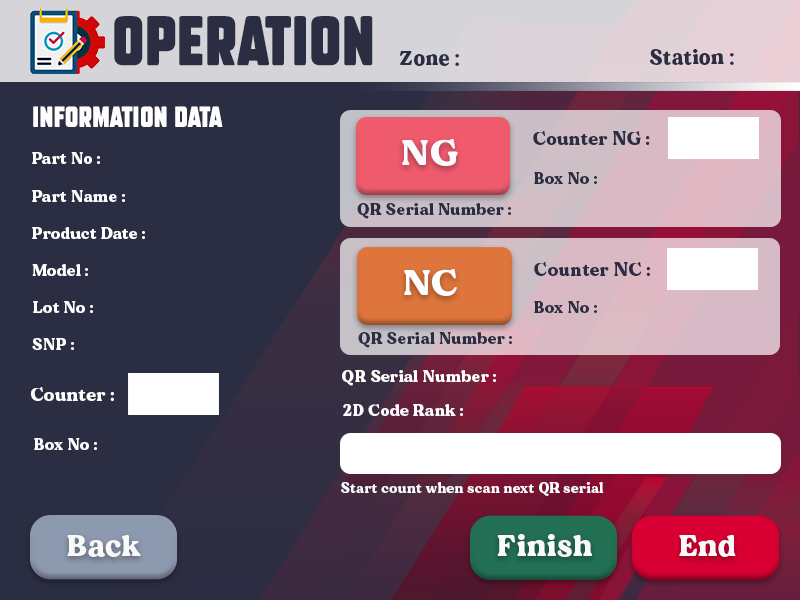
<style>
.page{position:relative;width:800px;height:600px;background:#2b2d42}
.page>*{position:absolute;margin:0}
.t1{font:48px "SubtleCurves";letter-spacing:0.025em;color:#2b2d42}
.t2{font:20px "MADEDillan";letter-spacing:0.025em;color:#2b2d42}
.t3{font:20px "SubtleCurves";letter-spacing:0.025em;color:#fefefe}
.t4{font:18px "MADEDillan";letter-spacing:0.025em;color:#2b2d42}
.t5{font:36px "MADEDillan";letter-spacing:0.025em;color:#fbfbff}
.t6{font:16px "MADEDillan";letter-spacing:0.025em;color:#fefefe}
.t7{font:16px "MADEDillan";letter-spacing:0.025em;color:#2b2d42}
.t8{font:36px "MADEDillan";letter-spacing:0.025em;color:#ffffff}
.t9{font:16px "MADEDillan";letter-spacing:0.025em;color:#ffffff}
.t10{font:18px "MADEDillan";letter-spacing:0.025em;color:#fefefe}
.t11{font:16px "MADEDillan";letter-spacing:0.025em;color:#fbfbff}
.t12{font:14px "MADEDillan";letter-spacing:0.025em;color:#fbfbff}
.t13{font:30px "MADEDillan";letter-spacing:0.025em;color:#f9f9f9}
</style>
<div class="page">
<p class="t1" style="left:114px;top:16px;width:259px;height:50px">operation</p>
<p class="t2" style="left:400px;top:51px;width:59px;height:15px">Zone :</p>
<p class="t2" style="left:650px;top:49px;width:84px;height:16px">Station :</p>
<p class="t3" style="left:33px;top:106px;width:190px;height:21px">Information Data</p>
<p class="t4" style="left:533px;top:131px;width:117px;height:14px">Counter NG :</p>
<p class="t5" style="left:402px;top:139px;width:56px;height:27px">NG</p>
<p class="t6" style="left:32px;top:152px;width:68px;height:12px">Part No :</p>
<p class="t7" style="left:534px;top:172px;width:63px;height:12px">Box No :</p>
<p class="t6" style="left:32px;top:190px;width:93px;height:12px">Part Name :</p>
<p class="t7" style="left:357px;top:203px;width:154px;height:16px">QR Serial Number :</p>
<p class="t6" style="left:32px;top:227px;width:113px;height:12px">Product Date :</p>
<p class="t6" style="left:32px;top:264px;width:56px;height:12px">Model :</p>
<p class="t8" style="left:404px;top:269px;width:53px;height:27px">NC</p>
<p class="t4" style="left:534px;top:262px;width:116px;height:14px">Counter NC :</p>
<p class="t6" style="left:33px;top:301px;width:60px;height:12px">Lot No :</p>
<p class="t7" style="left:534px;top:301px;width:63px;height:12px">Box No :</p>
<p class="t6" style="left:32px;top:338px;width:42px;height:12px">SNP :</p>
<p class="t7" style="left:358px;top:332px;width:154px;height:16px">QR Serial Number :</p>
<p class="t9" style="left:342px;top:370px;width:154px;height:16px">QR Serial Number :</p>
<p class="t10" style="left:31px;top:387px;width:83px;height:14px">Counter :</p>
<p class="t11" style="left:343px;top:404px;width:120px;height:12px">2D Code Rank :</p>
<p class="t6" style="left:34px;top:438px;width:63px;height:12px">Box No :</p>
<p class="t12" style="left:341px;top:482px;width:263px;height:14px">Start count when scan next QR serial</p>
<p class="t13" style="left:497px;top:534px;width:95px;height:23px">Finish</p>
<p class="t13" style="left:679px;top:534px;width:57px;height:23px">End</p>
<p class="t13" style="left:67px;top:535px;width:74px;height:22px">Back</p>
</div>
